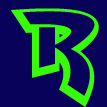
<style>
.page{position:relative;width:107px;height:107px;background:#08025a}
.page>*{position:absolute;margin:0}
.t1{font:100px "FatCap";color:#36fb09}
</style>
<div class="page">
<p class="t1" style="left:11px;top:8px;width:88px;height:99px">R</p>
</div>
